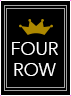
<style>
.page{position:relative;width:71px;height:96px;background:#000000}
.page>*{position:absolute;margin:0}
.t1{font:18px "Avenir-Light";color:#ffffff}
</style>
<div class="page">
<p class="t1" style="left:12px;top:42px;width:46px;height:13px">FOUR</p>
<p class="t1" style="left:14px;top:63px;width:42px;height:13px">ROW</p>
</div>
